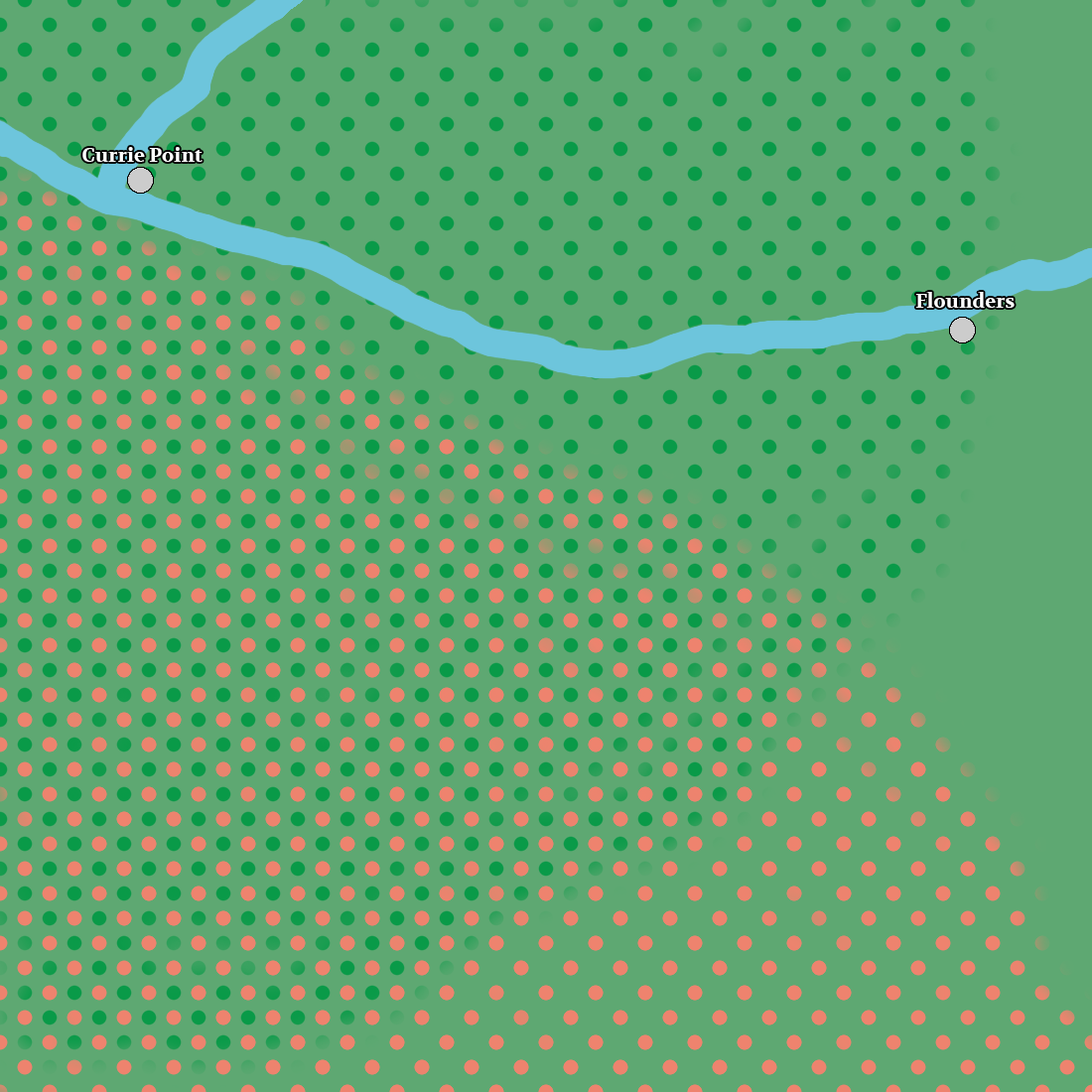
<style>
.page{position:relative;width:1092px;height:1092px;background:#5ea872}
.page>*{position:absolute;margin:0}
.t1{font:19.9px "Volkhov-Bold";color:#ffffff}
</style>
<div class="page">
<p class="t1" style="left:82px;top:147px;width:121px;height:15px">Currie Point</p>
<p class="t1" style="left:915px;top:292px;width:100px;height:16px">Flounders</p>
</div>
